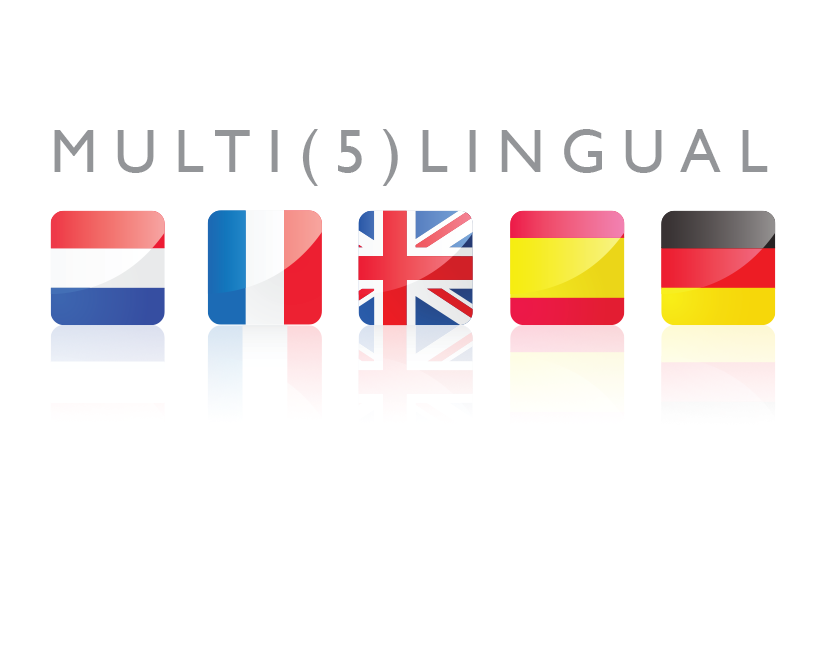
<style>
.page{position:relative;width:826px;height:650px;background:#ffffff}
.page>*{position:absolute;margin:0}
.t1{font:61px "GillSansMT";letter-spacing:0.27em;color:#939598}
</style>
<div class="page">
<p class="t1" style="left:54px;top:129px;width:714px;height:57px">MULTI(5)LINGUAL</p>
</div>
